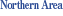
<style>
.page{position:relative;width:63px;height:16px;background:#ffffff}
.page>*{position:absolute;margin:0}
.t1{font:12px "RyuminPro-ExBold";letter-spacing:-0.08em;color:#2f4e96;scale:0.83 1}
</style>
<div class="page">
<p class="t1" style="left:0px;top:0px;width:63px;height:9px">Northern Area</p>
</div>
